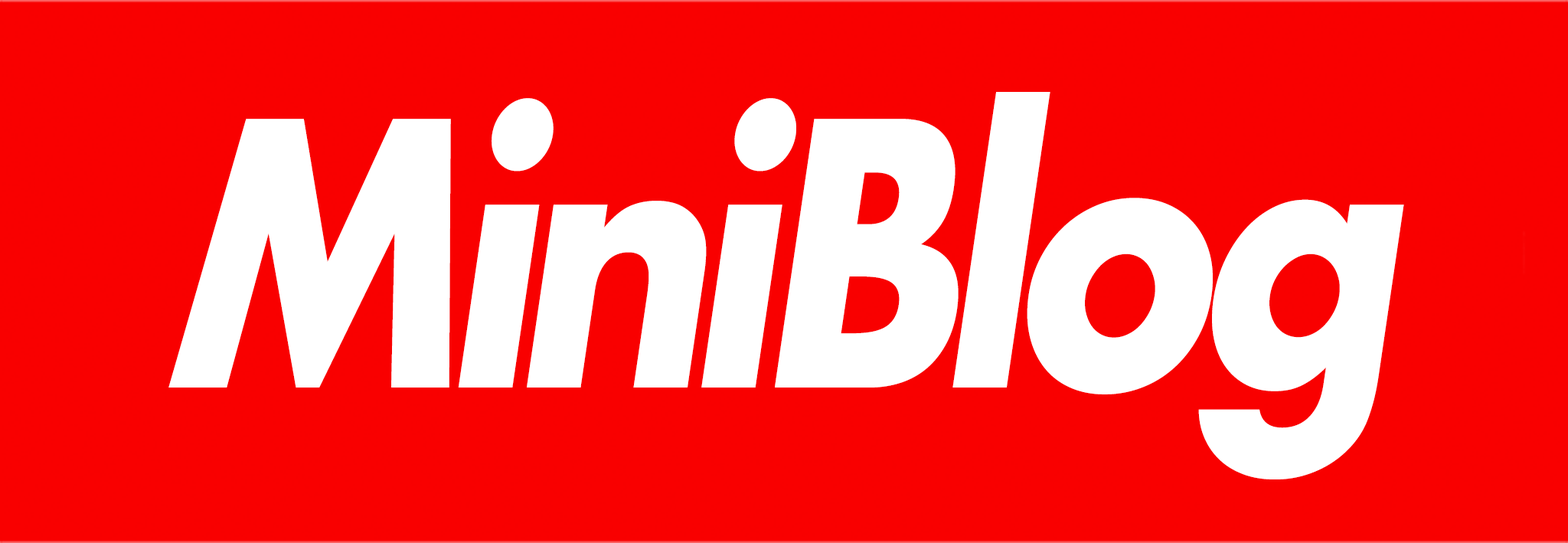
<style>
.page{position:relative;width:1568px;height:543px;background:#f90000}
.page>*{position:absolute;margin:0}
.t1{font:355.9px "Futura-Bold";letter-spacing:-0.075em;color:#ffffff;font-style:italic;scale:0.83 1}
</style>
<div class="page">
<p class="t1" style="left:168px;top:92px;width:1236px;height:387px">MiniBlog</p>
</div>
